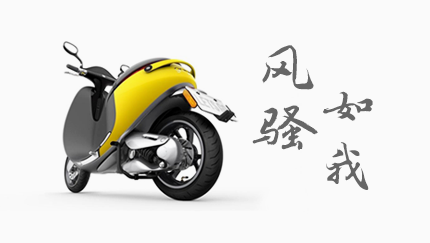
<style>
.page{position:relative;width:430px;height:243px;background:#fafafa}
.page>*{position:absolute;margin:0}
.t1{font:66.7px/60px "FZZJ-LJDXKJW";letter-spacing:-0.01em;color:#666666}
.t2{font:53.3px/60px "FZZJ-LJDXKJW";letter-spacing:-0.01em;color:#666666}
</style>
<div class="page">
<p class="t1" style="left:252px;top:45px;width:66px;height:105px">风<br>骚</p>
<p class="t2" style="left:323px;top:91px;width:50px;height:99px">如<br>我</p>
</div>
